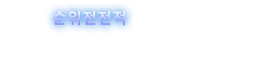
<style>
.page{position:relative;width:256px;height:64px;background:#ffffff}
.page>*{position:absolute;margin:0}
.t1{font:15px "MalgunGothicBold"}
</style>
<div class="page">
<p class="t1" style="left:53px;top:11px;width:72px;height:15px">순위전전적</p>
</div>
